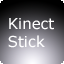
<style>
.page{position:relative;width:64px;height:64px}
.page>*{position:absolute;margin:0}
.t1{font:14.9px "Verdana";color:#ffffff}
</style>
<div class="page">
<p class="t1" style="left:8px;top:18px;width:46px;height:30px">Kinect<br>Stick</p>
</div>
